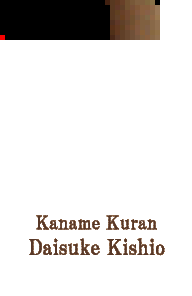
<style>
.page{position:relative;width:192px;height:296px;background:#ffffff}
.page>*{position:absolute;margin:0}
.t1{font:21.3px "HGPMinchoB";color:#583828}
.t2{font:18.7px "HGPMinchoB";color:#583828}
</style>
<div class="page">
<p class="t1" style="left:29px;top:215px;width:136px;height:41px;text-align:center"><span class="t2">Kaname Kuran<br></span>Daisuke Kishio</p>
</div>
